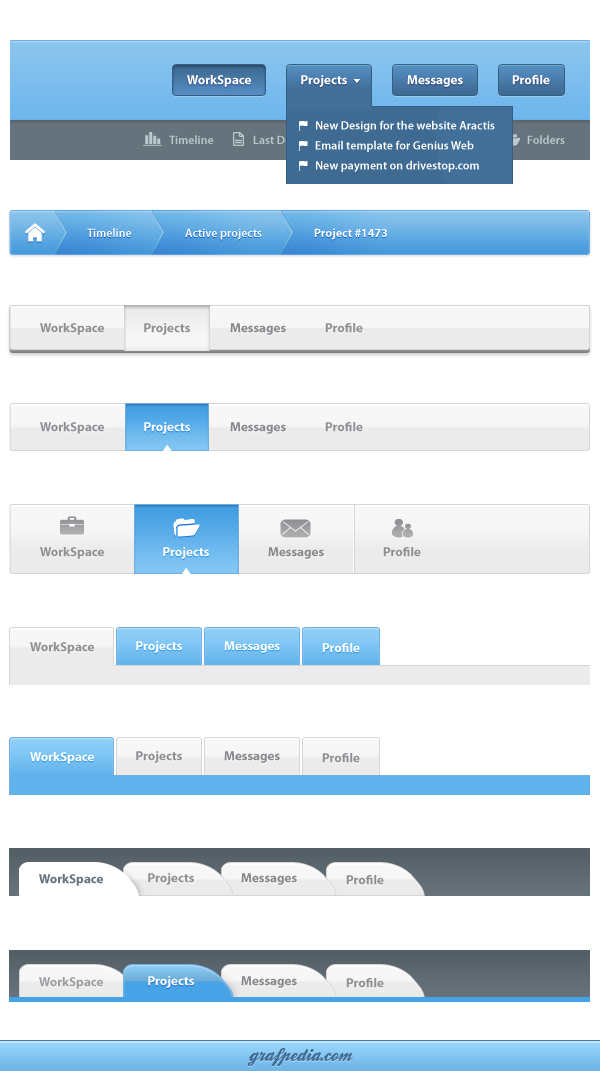
<style>
.page{position:relative;width:600px;height:1071px;background:#ffffff}
.page>*{position:absolute;margin:0}
.t1{font:13px "MyriadPro-Bold";color:#ffffff}
.t2{font:12px/20px "MyriadPro-Semibold";color:#ffffff}
.t3{font:12px "MyriadPro-Semibold";color:#bcc8d0}
.t4{font:12px "MyriadPro-Semibold";color:#ffffff}
.t5{font:12px "MyriadPro-Bold";color:#ffffff}
.t6{font:13px "MyriadPro-Bold";color:#8e9094}
.t7{font:13px "MyriadPro-Bold";color:#87898d}
.t8{font:13px "MyriadPro-Bold";color:#67737c}
.t9{font:13px "MyriadPro-Bold";color:#9d9ea2}
.t10{font:19px "BallparkWeiner";color:#4879a6}
</style>
<div class="page">
<p class="t1" style="left:187px;top:75px;width:64px;height:12px">WorkSpace</p>
<p class="t1" style="left:301px;top:75px;width:46px;height:12px">Projects</p>
<p class="t1" style="left:407px;top:75px;width:56px;height:12px">Messages</p>
<p class="t1" style="left:512px;top:75px;width:38px;height:10px">Profile</p>
<p class="t2" style="left:315px;top:120px;width:180px;height:52px">New Design for the website Aractis<br>Email template for Genius Web<br>New payment on drivestop.com</p>
<p class="t3" style="left:169px;top:135px;width:45px;height:9px">Timeline</p>
<p class="t3" style="left:253px;top:135px;width:49px;height:9px">Last Docs</p>
<p class="t3" style="left:527px;top:135px;width:38px;height:9px">Folders</p>
<p class="t4" style="left:87px;top:228px;width:45px;height:9px">Timeline</p>
<p class="t4" style="left:185px;top:228px;width:77px;height:12px">Active projects</p>
<p class="t5" style="left:314px;top:228px;width:73px;height:12px">Project #1473</p>
<p class="t6" style="left:40px;top:323px;width:64px;height:12px">WorkSpace</p>
<p class="t6" style="left:144px;top:323px;width:46px;height:12px">Projects</p>
<p class="t7" style="left:230px;top:323px;width:56px;height:12px">Messages</p>
<p class="t6" style="left:325px;top:323px;width:38px;height:10px">Profile</p>
<p class="t6" style="left:40px;top:422px;width:64px;height:12px">WorkSpace</p>
<p class="t1" style="left:144px;top:422px;width:46px;height:12px">Projects</p>
<p class="t7" style="left:230px;top:422px;width:56px;height:12px">Messages</p>
<p class="t6" style="left:325px;top:422px;width:38px;height:10px">Profile</p>
<p class="t6" style="left:40px;top:547px;width:64px;height:12px">WorkSpace</p>
<p class="t1" style="left:163px;top:547px;width:46px;height:12px">Projects</p>
<p class="t7" style="left:268px;top:547px;width:56px;height:12px">Messages</p>
<p class="t6" style="left:383px;top:547px;width:38px;height:10px">Profile</p>
<p class="t1" style="left:136px;top:641px;width:46px;height:12px">Projects</p>
<p class="t1" style="left:224px;top:641px;width:56px;height:12px">Messages</p>
<p class="t6" style="left:30px;top:642px;width:64px;height:12px">WorkSpace</p>
<p class="t1" style="left:322px;top:643px;width:38px;height:10px">Profile</p>
<p class="t1" style="left:30px;top:752px;width:64px;height:12px">WorkSpace</p>
<p class="t6" style="left:136px;top:751px;width:46px;height:12px">Projects</p>
<p class="t7" style="left:224px;top:751px;width:56px;height:12px">Messages</p>
<p class="t6" style="left:322px;top:753px;width:38px;height:10px">Profile</p>
<p class="t8" style="left:39px;top:874px;width:64px;height:12px">WorkSpace</p>
<p class="t6" style="left:148px;top:873px;width:46px;height:12px">Projects</p>
<p class="t7" style="left:241px;top:873px;width:56px;height:12px">Messages</p>
<p class="t6" style="left:346px;top:875px;width:38px;height:10px">Profile</p>
<p class="t9" style="left:39px;top:977px;width:64px;height:12px">WorkSpace</p>
<p class="t1" style="left:148px;top:976px;width:46px;height:12px">Projects</p>
<p class="t7" style="left:241px;top:976px;width:56px;height:12px">Messages</p>
<p class="t6" style="left:346px;top:978px;width:38px;height:10px">Profile</p>
<p class="t10" style="left:247px;top:1048px;width:106px;height:18px">grafpedia.com</p>
</div>
